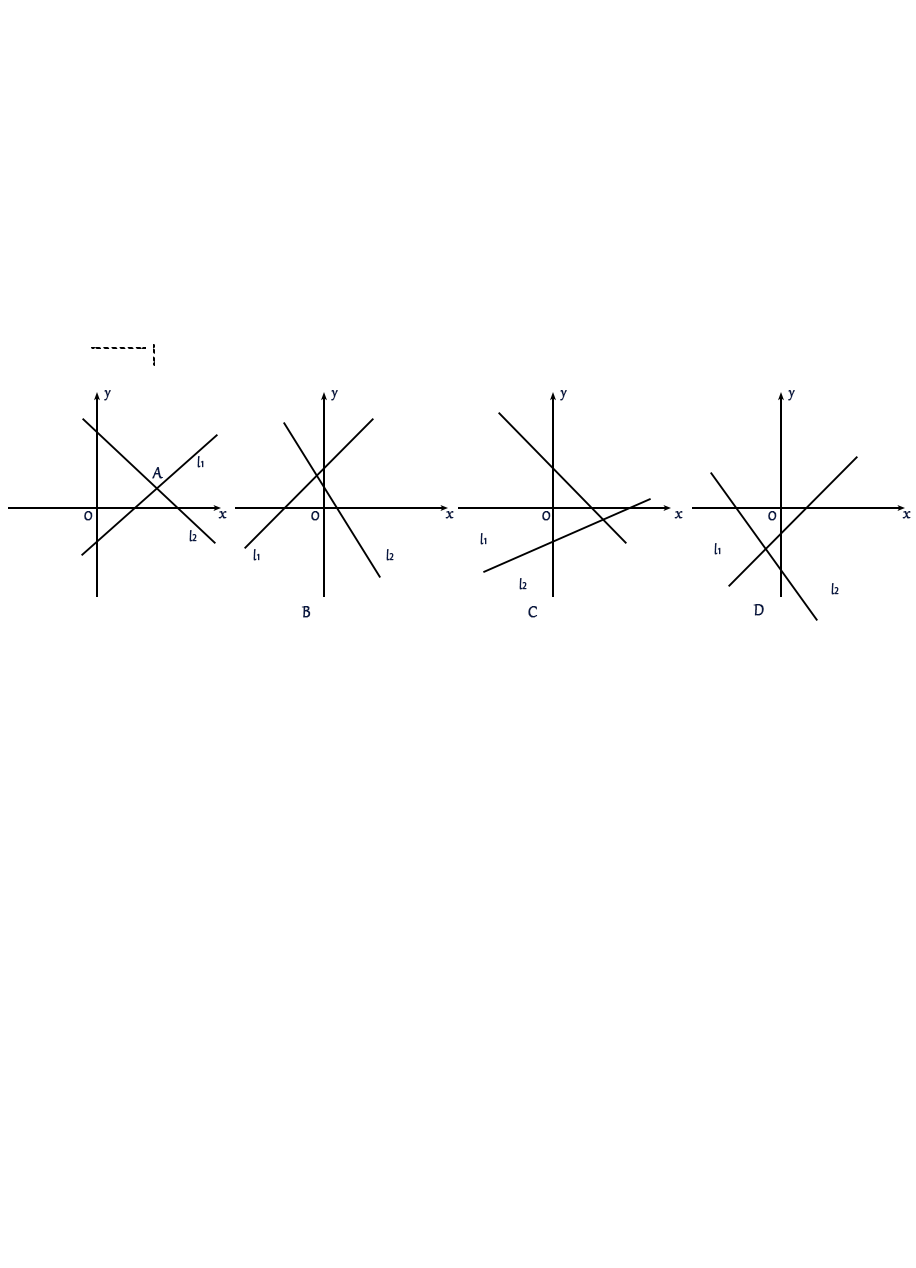
<style>
.page{position:relative;width:916px;height:1268px;background:#ffffff}
.page>*{position:absolute;margin:0}
.t1{font:16px "Gabriola";color:#081842;font-weight:bold}
.t2{font:12px "Gabriola";color:#081842;font-weight:bold}
.t3{font:8px "AdobeHeitiStd-Regular";color:#081842;font-weight:bold}
.t4{font:18.7px "Gabriola";color:#081842;font-weight:bold}
</style>
<div class="page">
<p class="t1" style="left:104px;top:390px;width:7px;height:11px">y</p>
<p class="t1" style="left:331px;top:390px;width:7px;height:11px">y</p>
<p class="t1" style="left:560px;top:390px;width:7px;height:11px">y</p>
<p class="t1" style="left:788px;top:390px;width:7px;height:11px">y</p>
<p class="t2" style="left:197px;top:456px;width:7px;height:12px">l<span class="t3">1</span></p>
<p class="t4" style="left:152px;top:467px;width:11px;height:12px">A</p>
<p class="t1" style="left:84px;top:511px;width:9px;height:10px">O</p>
<p class="t4" style="left:218px;top:511px;width:9px;height:8px">x</p>
<p class="t1" style="left:311px;top:511px;width:9px;height:10px">O</p>
<p class="t4" style="left:445px;top:511px;width:9px;height:8px">x</p>
<p class="t1" style="left:542px;top:511px;width:9px;height:10px">O</p>
<p class="t4" style="left:674px;top:511px;width:9px;height:8px">x</p>
<p class="t1" style="left:768px;top:511px;width:9px;height:10px">O</p>
<p class="t4" style="left:902px;top:511px;width:9px;height:8px">x</p>
<p class="t2" style="left:189px;top:530px;width:8px;height:12px">l<span class="t3">2</span></p>
<p class="t2" style="left:480px;top:533px;width:7px;height:12px">l<span class="t3">1</span></p>
<p class="t2" style="left:714px;top:543px;width:7px;height:12px">l<span class="t3">1</span></p>
<p class="t2" style="left:253px;top:549px;width:7px;height:12px">l<span class="t3">1</span></p>
<p class="t2" style="left:386px;top:549px;width:8px;height:12px">l<span class="t3">2</span></p>
<p class="t2" style="left:519px;top:578px;width:8px;height:12px">l<span class="t3">2</span></p>
<p class="t2" style="left:831px;top:583px;width:8px;height:12px">l<span class="t3">2</span></p>
<p class="t4" style="left:301px;top:606px;width:10px;height:12px">B</p>
<p class="t4" style="left:528px;top:606px;width:10px;height:12px">C</p>
<p class="t4" style="left:753px;top:604px;width:11px;height:12px">D</p>
</div>
